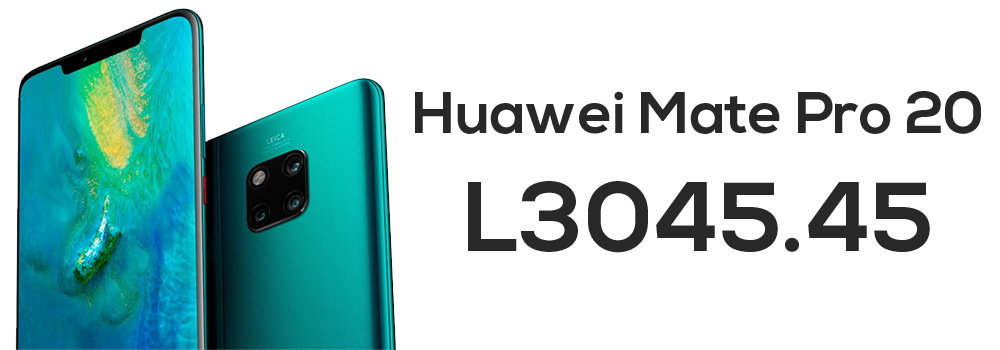
<style>
.page{position:relative;width:1000px;height:350px;background:#ffffff}
.page>*{position:absolute;margin:0}
.t1{font:59px "NexaBold";color:#282828}
.t2{font:98px "NexaBold";color:#282828}
</style>
<div class="page">
<p class="t1" style="left:415px;top:90px;width:566px;height:163px;text-align:center">Huawei Mate Pro 20<br><span class="t2">L3045.45</span></p>
</div>
